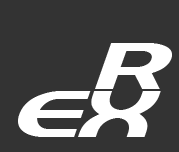
<style>
.page{position:relative;width:179px;height:152px;background:#333333}
.page>*{position:absolute;margin:0}
.t1{font:72px "QuickExpress";letter-spacing:0.05em;color:#ffffff;text-transform:uppercase}
.t2{font:72px "QuickExpress";letter-spacing:-0.1em;color:#ffffff;text-transform:uppercase}
</style>
<div class="page">
<p class="t1" style="left:95px;top:43px;width:77px;height:46px">R</p>
<p class="t2" style="left:18px;top:91px;width:143px;height:46px"><span class="t1"><br></span>EX</p>
</div>
